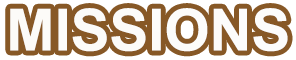
<style>
.page{position:relative;width:296px;height:60px;background:#875826}
.page>*{position:absolute;margin:0}
.t1{font:58px "Arial-BoldMT";color:#ffffff}
</style>
<div class="page">
<p class="t1" style="left:10px;top:8px;width:278px;height:44px">MISSIONS</p>
</div>
